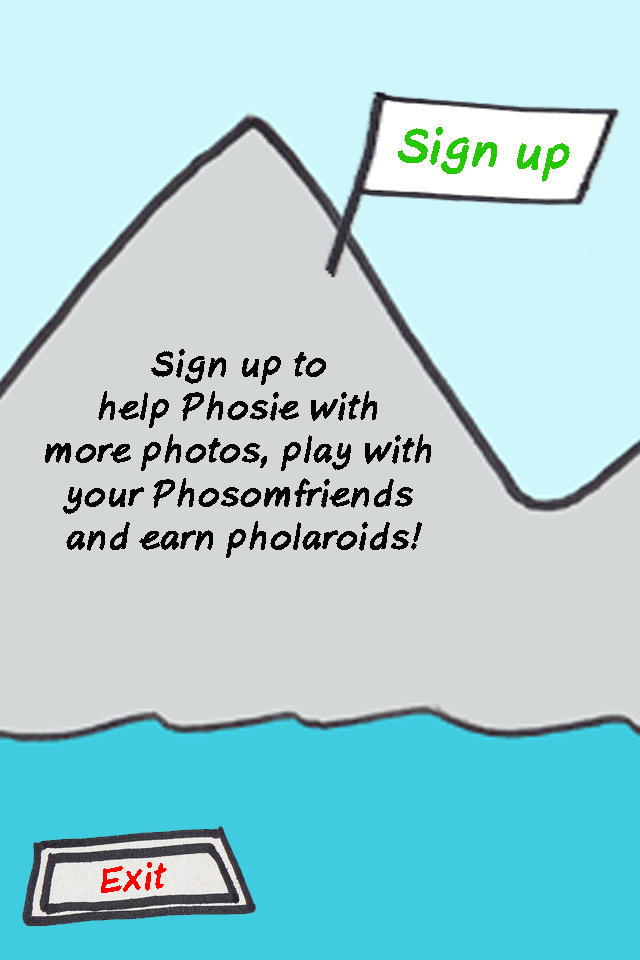
<style>
.page{position:relative;width:640px;height:960px;background:#cef6fb}
.page>*{position:absolute;margin:0}
.t1{font:48px "AxureHandwriting-BoldItalic";color:#26c601}
.t2{font:36px "AxureHandwriting-BoldItalic";color:#000000}
.t3{font:36px "AxureHandwriting-BoldItalic";color:#ff0000}
</style>
<div class="page">
<p class="t1" style="left:398px;top:127px;width:172px;height:55px;rotate:3deg">Sign up</p>
<p class="t2" style="left:45px;top:349px;width:386px;height:209px;text-align:center">Sign up to <br>help Phosie with <br>more photos, play with <br>your Phosomfriends <br>and earn pholaroids!</p>
<p class="t3" style="left:101px;top:862px;width:66px;height:31px;rotate:-4deg">Exit</p>
</div>
